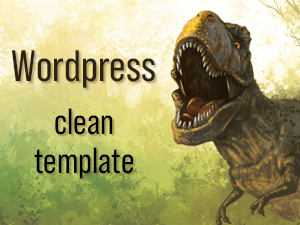
<style>
.page{position:relative;width:300px;height:225px}
.page>*{position:absolute;margin:0}
.t1{font:44px "BebasNeuePro-Regular";color:#2b2311}
.t2{font:36.4px/38.5px "BebasNeuePro-Regular";color:#000000}
</style>
<div class="page">
<p class="t1" style="left:12px;top:50px;width:143px;height:38px">Wordpress</p>
<p class="t2" style="left:34px;top:108px;width:99px;height:71px;text-align:center">clean<br>template</p>
</div>
